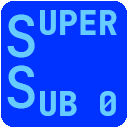
<style>
.page{position:relative;width:128px;height:128px;background:#0033ff}
.page>*{position:absolute;margin:0}
.t1{font:56.9px "JetBrainsMono-ExtraBold";color:#66ccff}
.t2{font:56.9px "JetBrainsMono-SemiBold";color:#66ccff}
.t3{font:56.9px/51.2px "JetBrainsMono-SemiBold";color:#66ccff}
.t4{font:56.9px/51.2px "JetBrainsMono-ExtraBold";color:#66ccff}
</style>
<div class="page">
<p class="t1" style="left:7px;top:10px;width:110px;height:106px"><span class="t2">S</span>UPER<br><span class="t3">S</span><span class="t4">UB 0</span></p>
</div>
